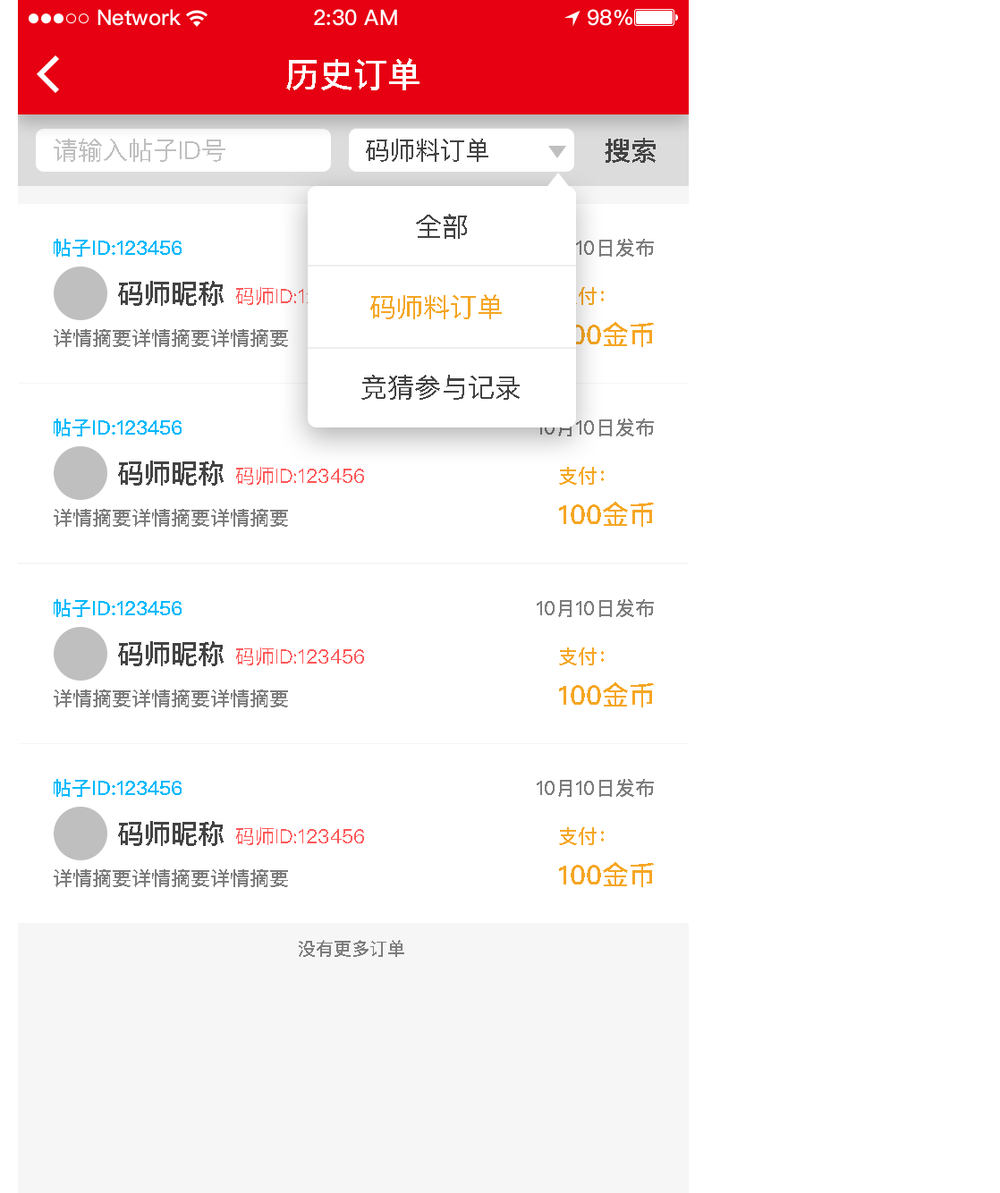
<style>
.page{position:relative;width:1000px;height:1193px;background:#ffffff}
.page>*{position:absolute;margin:0}
.t1{font:34px "PingFangSC-Medium";color:#ffffff;text-transform:uppercase}
.t2{font:26.8px "PingFangSC-Medium";color:#434343;text-transform:uppercase}
.t3{font:25px "PingFangSC-Regular";color:#bfbfbf;text-transform:uppercase}
.t4{font:25px "PingFangSC-Regular";color:#434343;text-transform:uppercase}
.t5{font:26.8px "PingFangSC-Regular";color:#434343;text-transform:uppercase}
.t6{font:19.7px "PingFangSC-Medium";color:#01b9fd;text-transform:uppercase}
.t7{font:19.7px "PingFangSC-Medium";color:#7d7d7d;text-transform:uppercase}
.t8{font:19.7px "PingFangSC-Regular";text-transform:uppercase}
.t9{font:19.7px "PingFangSC-Medium";text-transform:uppercase}
.t10{font:26.8px "PingFangSC-Regular";color:#f5a623;text-transform:uppercase}
.t11{font:26.8px "PingFangSC-Medium";color:#f6a623;text-transform:uppercase}
.t12{font:19.7px "PingFangSC-Regular";color:#ff5858;text-transform:uppercase}
.t13{font:19.7px "PingFangSC-Medium";color:#f6a623;text-transform:uppercase}
.t14{font:17.9px "PingFangSC-Medium";color:#7d7d7d;text-transform:uppercase}
</style>
<div class="page">
<p class="t1" style="left:286px;top:58px;width:133px;height:32px">历史订单</p>
<p class="t2" style="left:604px;top:138px;width:51px;height:25px">搜索</p>
<p class="t3" style="left:54px;top:139px;width:171px;height:23px">请输入帖子id号</p>
<p class="t4" style="left:366px;top:139px;width:122px;height:23px">码师料订单</p>
<p class="t5" style="left:416px;top:214px;width:51px;height:25px">全部</p>
<p class="t6" style="left:54px;top:239px;width:128px;height:18px">帖子id:123456</p>
<p class="t7" style="left:536px;top:239px;width:118px;height:18px">10月10日发布</p>
<p class="t2" style="left:118px;top:281px;width:106px;height:25px">码师昵称</p>
<p class="t8" style="left:236px;top:287px;width:128px;height:18px">码师id:123456</p>
<p class="t9" style="left:559px;top:287px;width:45px;height:18px">支付：</p>
<p class="t10" style="left:370px;top:294px;width:132px;height:25px">码师料订单</p>
<p class="t7" style="left:54px;top:329px;width:234px;height:18px">详情摘要详情摘要详情摘要</p>
<p class="t11" style="left:559px;top:322px;width:95px;height:25px">100金币</p>
<p class="t5" style="left:361px;top:375px;width:159px;height:25px">竞猜参与记录</p>
<p class="t6" style="left:54px;top:418px;width:128px;height:18px">帖子id:123456</p>
<p class="t7" style="left:536px;top:418px;width:118px;height:18px">10月10日发布</p>
<p class="t2" style="left:118px;top:460px;width:106px;height:26px">码师昵称</p>
<p class="t12" style="left:236px;top:467px;width:128px;height:18px">码师id:123456</p>
<p class="t13" style="left:559px;top:467px;width:45px;height:18px">支付：</p>
<p class="t7" style="left:54px;top:509px;width:234px;height:18px">详情摘要详情摘要详情摘要</p>
<p class="t11" style="left:559px;top:502px;width:95px;height:25px">100金币</p>
<p class="t6" style="left:54px;top:599px;width:128px;height:18px">帖子id:123456</p>
<p class="t7" style="left:536px;top:599px;width:118px;height:18px">10月10日发布</p>
<p class="t2" style="left:118px;top:641px;width:106px;height:25px">码师昵称</p>
<p class="t12" style="left:236px;top:647px;width:128px;height:18px">码师id:123456</p>
<p class="t13" style="left:559px;top:647px;width:45px;height:18px">支付：</p>
<p class="t7" style="left:54px;top:689px;width:234px;height:18px">详情摘要详情摘要详情摘要</p>
<p class="t11" style="left:559px;top:682px;width:95px;height:25px">100金币</p>
<p class="t6" style="left:54px;top:779px;width:128px;height:18px">帖子id:123456</p>
<p class="t7" style="left:536px;top:779px;width:118px;height:18px">10月10日发布</p>
<p class="t2" style="left:118px;top:821px;width:106px;height:25px">码师昵称</p>
<p class="t12" style="left:236px;top:827px;width:128px;height:18px">码师id:123456</p>
<p class="t13" style="left:559px;top:827px;width:45px;height:18px">支付：</p>
<p class="t7" style="left:54px;top:869px;width:234px;height:18px">详情摘要详情摘要详情摘要</p>
<p class="t11" style="left:559px;top:862px;width:95px;height:25px">100金币</p>
<p class="t14" style="left:299px;top:940px;width:105px;height:17px">没有更多订单</p>
</div>
